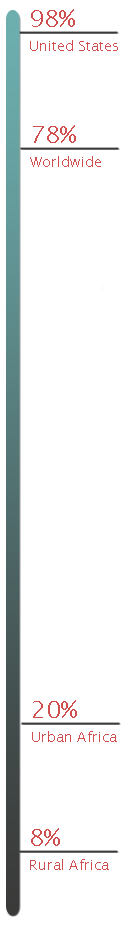
<style>
.page{position:relative;width:121px;height:929px;background:#ffffff}
.page>*{position:absolute;margin:0}
.t1{font:14px/24px "LucidaSansUnicode";color:#cf4f4f}
.t2{font:24px/24px "LucidaSansUnicode";color:#cf4f4f}
</style>
<div class="page">
<p class="t1" style="left:30px;top:9px;width:88px;height:42px"><span class="t2">98%<br></span>United States</p>
<p class="t1" style="left:30px;top:125px;width:71px;height:42px"><span class="t2">78%<br></span>Worldwide</p>
<p class="t1" style="left:32px;top:700px;width:85px;height:42px"><span class="t2">20%<br></span>Urban Africa</p>
<p class="t1" style="left:30px;top:828px;width:79px;height:42px"><span class="t2">8%<br></span>Rural Africa</p>
</div>
